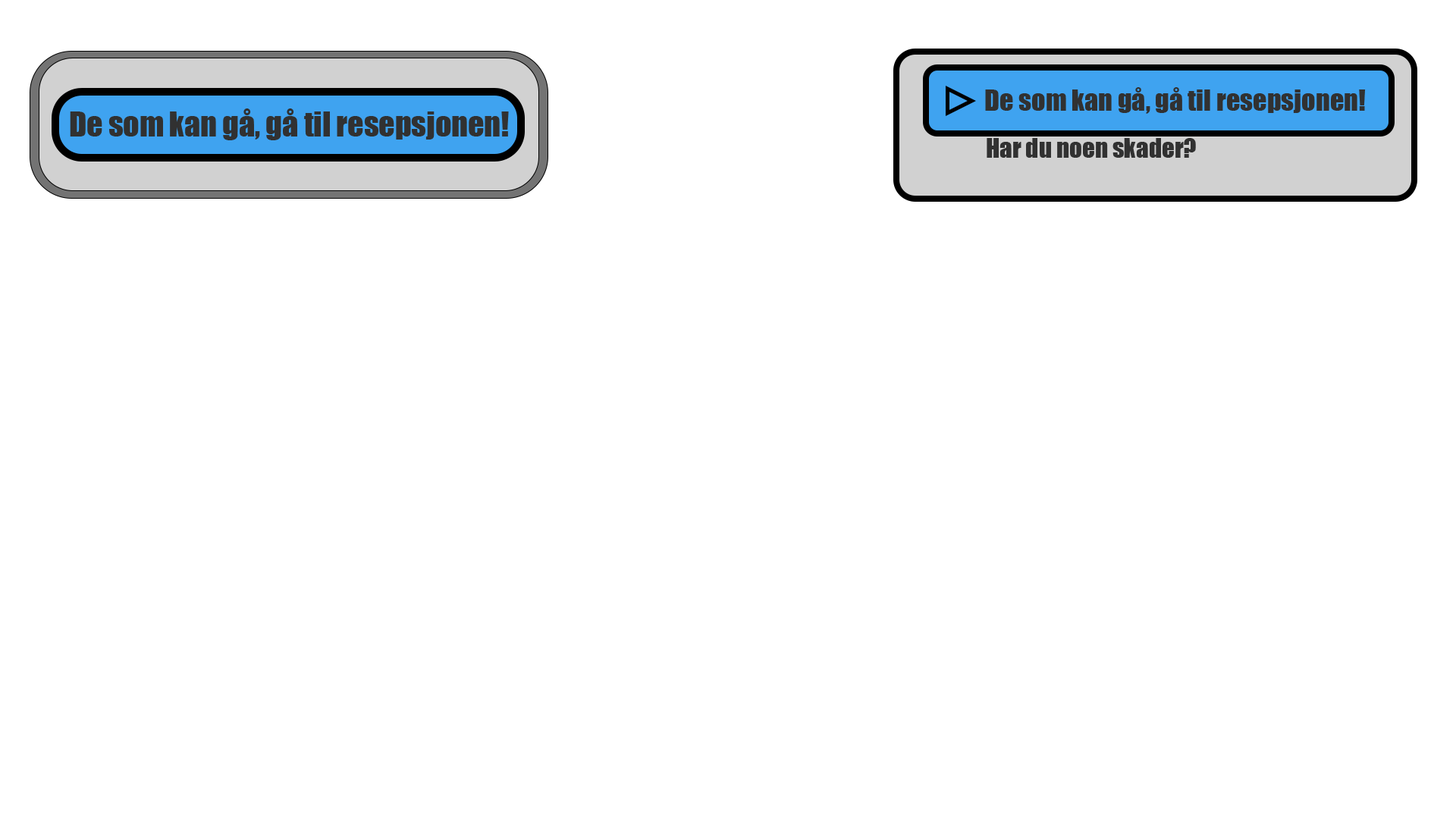
<style>
.page{position:relative;width:1456px;height:819px;background:#ffffff}
.page>*{position:absolute;margin:0}
.t1{font:27.4px "Impact";color:#313131}
.t2{font:31.7px "Impact";color:#313131}
.t3{font:25px "Impact";color:#313131}
</style>
<div class="page">
<p class="t1" style="left:985px;top:87px;width:381px;height:27px">De som kan gå, gå til resepsjonen!</p>
<p class="t2" style="left:70px;top:108px;width:439px;height:32px">De som kan gå, gå til resepsjonen!</p>
<p class="t3" style="left:987px;top:138px;width:209px;height:20px">Har du noen skader?</p>
</div>
